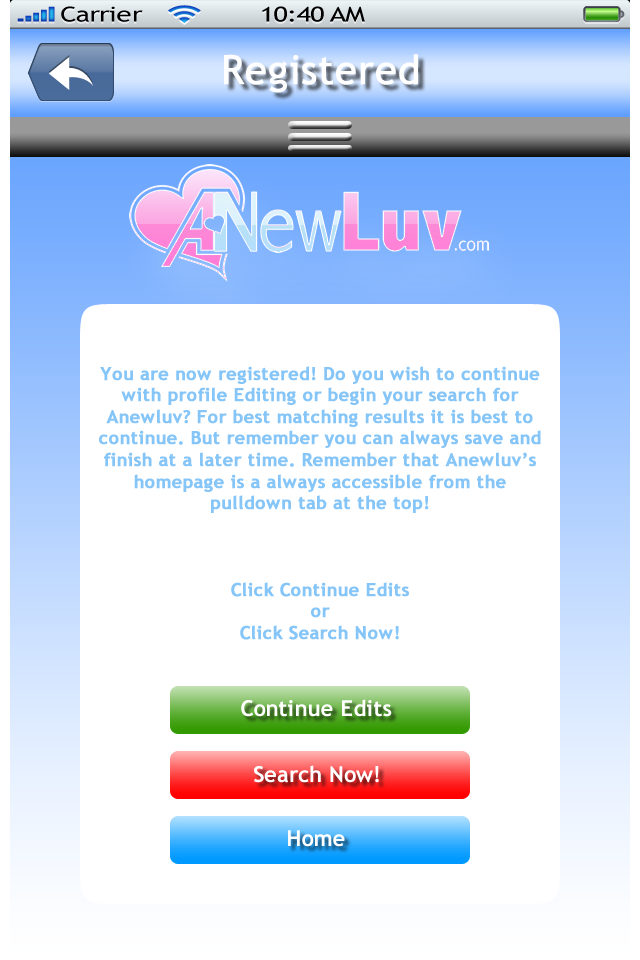
<style>
.page{position:relative;width:640px;height:960px;background:#ffffff}
.page>*{position:absolute;margin:0}
.t1{font:40px "TrebuchetMS";color:#ffffff;font-weight:bold}
.t2{font:18px/21.6px "TrebuchetMS-Bold";color:#85c5f8;font-weight:bold}
.t3{font:22px "TrebuchetMS-Bold";color:#ffffff}
</style>
<div class="page">
<p class="t1" style="left:224px;top:54px;width:194px;height:39px">Registered</p>
<p class="t2" style="left:99px;top:366px;width:442px;height:147px;text-align:center">You are now registered! Do you wish to continue with profile Editing or begin your search for Anewluv? For best matching results it is best to continue. But remember you can always save and finish at a later time. Remember that Anewluv’s homepage is a always accessible from the pulldown tab at the top!</p>
<p class="t2" style="left:231px;top:582px;width:178px;height:58px;text-align:center">Click Continue Edits <br>or <br>Click Search Now!</p>
<p class="t3" style="left:241px;top:699px;width:151px;height:18px">Continue Edits</p>
<p class="t3" style="left:254px;top:765px;width:125px;height:18px">Search Now!</p>
<p class="t3" style="left:288px;top:830px;width:57px;height:17px">Home</p>
</div>
